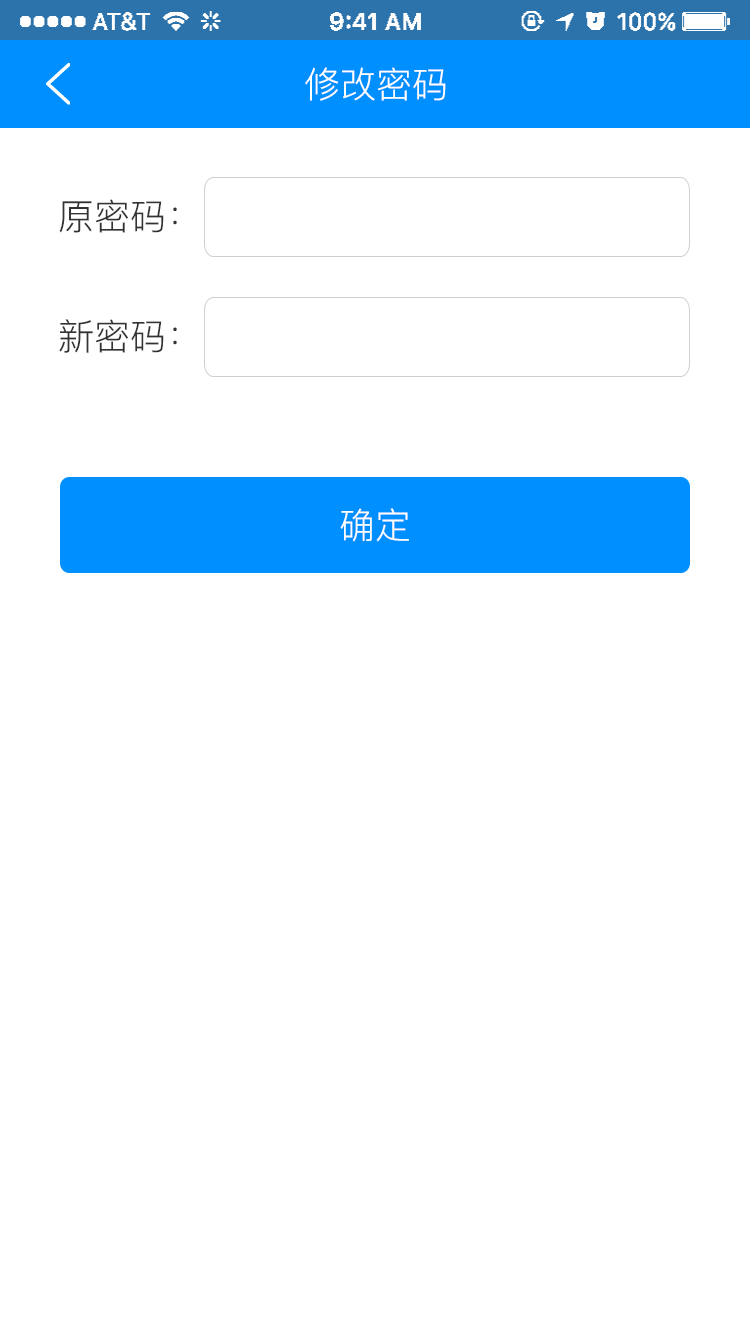
<style>
.page{position:relative;width:750px;height:1334px;background:#ffffff}
.page>*{position:absolute;margin:0}
.t1{font:36px "PingFang-SC-Regular";color:#ffffff}
.t2{font:36px "PingFang-SC-Regular";color:#333333}
</style>
<div class="page">
<p class="t1" style="left:305px;top:67px;width:141px;height:34px">修改密码</p>
<p class="t2" style="left:59px;top:199px;width:118px;height:34px">原密码：</p>
<p class="t2" style="left:59px;top:319px;width:118px;height:34px">新密码：</p>
<p class="t1" style="left:340px;top:508px;width:69px;height:34px">确定</p>
</div>
